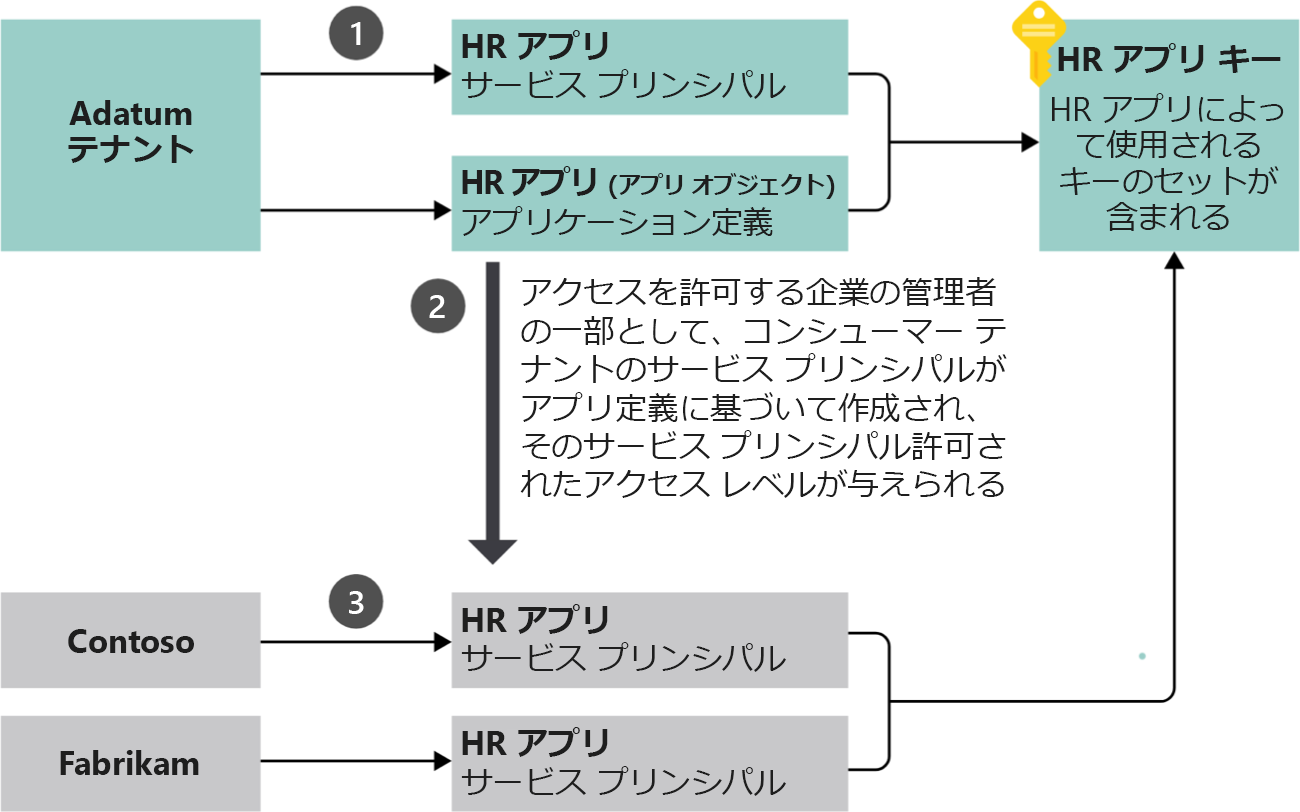
<style>
.page{position:relative;width:1300px;height:812px;background:#ffffff}
.page>*{position:absolute;margin:0}
.t1{font:32.5px "SegoeUI-Semibold";color:#ffffff;scale:1.04 1}
.t2{font:32px "Meiryo-Bold";color:#1e1e1e}
.t3{font:32.9px "SegoeUI-Bold";color:#1e1e1e}
.t4{font:32px "Meiryo";letter-spacing:-0.02em;color:#1e1e1e}
.t5{font:32.9px/36px "SegoeUI-Bold";color:#1e1e1e}
.t6{font:32px/36px "Meiryo-Bold";color:#1e1e1e}
.t7{font:32px/36px "Meiryo";letter-spacing:-0.02em;color:#1e1e1e}
.t8{font:32.9px/36px "SegoeUI";color:#1e1e1e}
.t9{font:24px "Meiryo-Bold";letter-spacing:-0.045em;color:#1e1e1e;scale:0.97 1}
.t10{font:32.9px "SegoeUI-Bold";letter-spacing:-0.045em;color:#1e1e1e;scale:0.97 1}
.t11{font:32px "Meiryo-Bold";letter-spacing:-0.045em;color:#1e1e1e;scale:0.97 1}
</style>
<div class="page">
<p class="t1" style="left:351px;top:22px;width:10px;height:23px">1</p>
<p class="t2" style="left:462px;top:30px;width:146px;height:30px"><span class="t3">HR </span>アプリ</p>
<p class="t2" style="left:1058px;top:43px;width:223px;height:30px"><span class="t3">HR </span>アプリ キー</p>
<p class="t4" style="left:461px;top:69px;width:325px;height:30px">サービス プリンシパル</p>
<p class="t5" style="left:68px;top:100px;width:126px;height:63px;text-align:center">Adatum <span class="t6">テナント</span></p>
<p class="t7" style="left:1052px;top:93px;width:232px;height:138px;text-align:center"><span class="t8">HR </span>アプリによっ<br>て使用される<br>キーのセットが<br>含まれる</p>
<p class="t9" style="left:462px;top:166px;width:373px;height:33px"><span class="t10">HR </span><span class="t11">アプリ </span>(アプリ オブジェクト)</p>
<p class="t4" style="left:462px;top:206px;width:311px;height:30px">アプリケーション定義</p>
<p class="t4" style="left:520px;top:277px;width:487px;height:221px">アクセスを許可する企業の管理者の一部として、コンシューマー テナントのサービス プリンシパルがアプリ定義に基づいて作成され、そのサービス プリンシパル許可されたアクセス レベルが与えられる</p>
<p class="t1" style="left:429px;top:295px;width:16px;height:23px">2</p>
<p class="t1" style="left:349px;top:591px;width:15px;height:23px">3</p>
<p class="t2" style="left:462px;top:604px;width:146px;height:30px"><span class="t3">HR </span>アプリ</p>
<p class="t3" style="left:68px;top:629px;width:126px;height:24px">Contoso</p>
<p class="t4" style="left:461px;top:642px;width:325px;height:30px">サービス プリンシパル</p>
<p class="t2" style="left:462px;top:727px;width:146px;height:30px"><span class="t3">HR </span>アプリ</p>
<p class="t3" style="left:60px;top:750px;width:139px;height:25px">Fabrikam</p>
<p class="t4" style="left:461px;top:766px;width:325px;height:30px">サービス プリンシパル</p>
</div>
